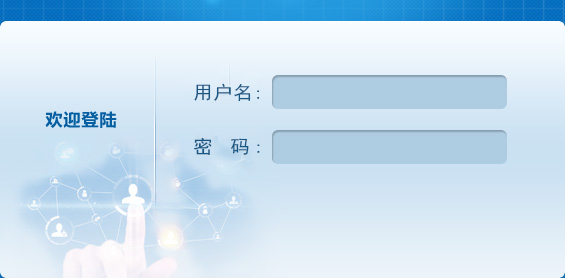
<style>
.page{position:relative;width:565px;height:278px}
.page>*{position:absolute;margin:0}
.t1{font:18.5px "SimHei";letter-spacing:0.025em;color:#1a5783;scale:1.06 1}
.t2{font:18.5px "SimHei";letter-spacing:0.2em;color:#1a5783;scale:1.06 1}
</style>
<div class="page">
<p class="t1" style="left:194px;top:83px;width:66px;height:19px">用户名<span class="t2">:</span></p>
<p class="t2" style="left:194px;top:138px;width:66px;height:17px">密 码:</p>
</div>
